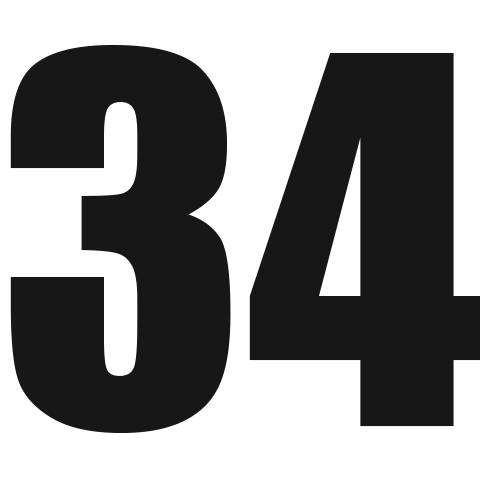
<style>
.page{position:relative;width:480px;height:480px;background:#171717}
.page>*{position:absolute;margin:0}
.t1{font:472.3px "Impact";color:#171717}
</style>
<div class="page">
<p class="t1" style="left:10px;top:45px;width:470px;height:388px">34</p>
</div>
